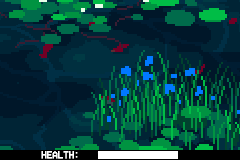
<style>
.page{position:relative;width:240px;height:160px;background:#002435}
.page>*{position:absolute;margin:0}
.t1{font:9px "VCROSDMono";color:#ffffff;font-weight:bold}
</style>
<div class="page">
<p class="t1" style="left:41px;top:151px;width:37px;height:8px">HEALTH:</p>
</div>
